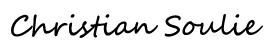
<style>
.page{position:relative;width:268px;height:44px;background:#ffffff}
.page>*{position:absolute;margin:0}
.t1{font:27.8px "SegoeScript";color:#000000}
</style>
<div class="page">
<p class="t1" style="left:11px;top:14px;width:252px;height:24px">Christian Soulie</p>
</div>
